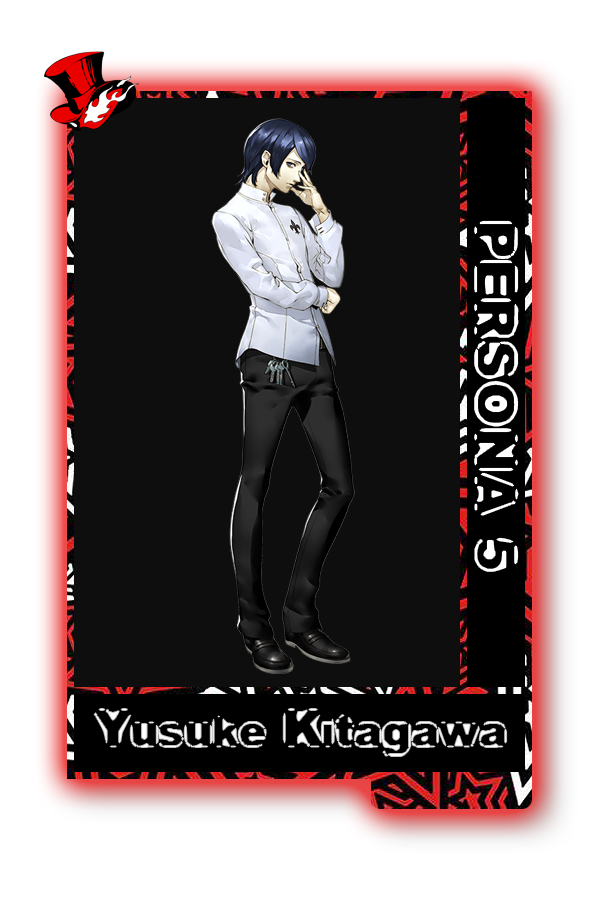
<style>
.page{position:relative;width:600px;height:900px;background:#0e0e0e}
.page>*{position:absolute;margin:0}
.t1{font:41.7px "Untitled";color:#ffffff}
.t2{font:37.5px "Untitled";letter-spacing:-0.06em;color:#fdfdfd}
</style>
<div class="page">
<p class="t1" style="left:475px;top:221px;width:43px;height:350px;rotate:90deg">PERSONA 5</p>
<p class="t2" style="left:94px;top:709px;width:413px;height:47px">Yusuke Kitagawa</p>
</div>
